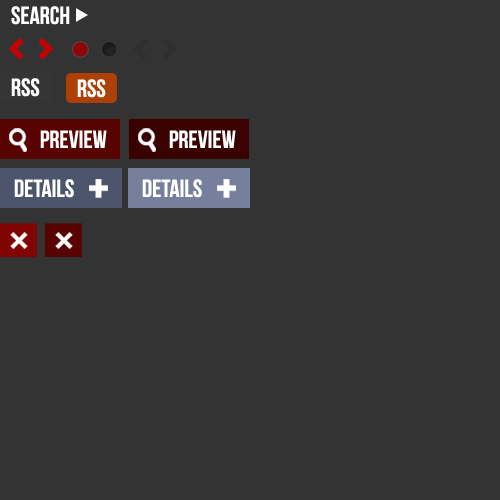
<style>
.page{position:relative;width:500px;height:500px;background:#333333}
.page>*{position:absolute;margin:0}
.t1{font:25px "BebasNeue";color:#ffffff}
</style>
<div class="page">
<p class="t1" style="left:11px;top:6px;width:59px;height:19px">search</p>
<p class="t1" style="left:11px;top:78px;width:29px;height:19px">rss</p>
<p class="t1" style="left:77px;top:79px;width:29px;height:19px">rss</p>
<p class="t1" style="left:40px;top:130px;width:67px;height:18px">Preview</p>
<p class="t1" style="left:169px;top:130px;width:67px;height:18px">Preview</p>
<p class="t1" style="left:14px;top:179px;width:60px;height:19px">Details</p>
<p class="t1" style="left:142px;top:179px;width:60px;height:19px">Details</p>
</div>
